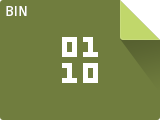
<style>
.page{position:relative;width:160px;height:120px;background:#707d3e}
.page>*{position:absolute;margin:0}
.t1{font:14px "FiraSans-Regular";color:#ffffff}
</style>
<div class="page">
<p class="t1" style="left:6px;top:6px;width:21px;height:10px">BIN</p>
</div>
